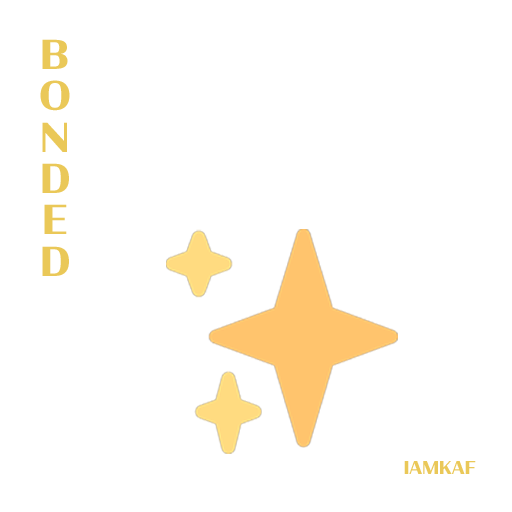
<style>
.page{position:relative;width:512px;height:512px;background:#ffffff}
.page>*{position:absolute;margin:0}
.t1{font:39.7px/41.3px "Condor-Bold";color:#eac858;text-transform:uppercase}
.t2{font:17.6px "Condor-Bold";color:#eac858;text-transform:uppercase}
</style>
<div class="page">
<p class="t1" style="left:40px;top:39px;width:30px;height:237px;text-align:center">b<br>o<br>n<br>d<br>e<br>d</p>
<p class="t2" style="left:404px;top:461px;width:72px;height:13px">iamkaf</p>
</div>
